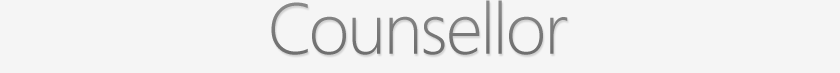
<style>
.page{position:relative;width:840px;height:73px;background:#f5f5f5}
.page>*{position:absolute;margin:0}
.t1{font:72px "SegoeUI-Light";color:#757575}
</style>
<div class="page">
<p class="t1" style="left:271px;top:0px;width:297px;height:55px">Counsellor</p>
</div>
